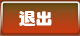
<style>
.page{position:relative;width:80px;height:36px}
.page>*{position:absolute;margin:0}
.t1{font:15.5px "STHupo";color:#ffffff;scale:1.09 1}
</style>
<div class="page">
<p class="t1" style="left:19px;top:11px;width:33px;height:15px">退出</p>
</div>
